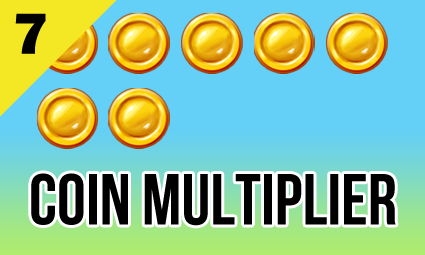
<style>
.page{position:relative;width:425px;height:255px;background:#64cff7}
.page>*{position:absolute;margin:0}
.t1{font:60px "FranklinGothic-Heavy";color:#000000}
.t2{font:72px "BebasNeueBold";color:#000000}
</style>
<div class="page">
<p class="t1" style="left:15px;top:13px;width:31px;height:41px">7</p>
<p class="t2" style="left:31px;top:173px;width:365px;height:53px">COIN MULTIPLIER</p>
</div>
